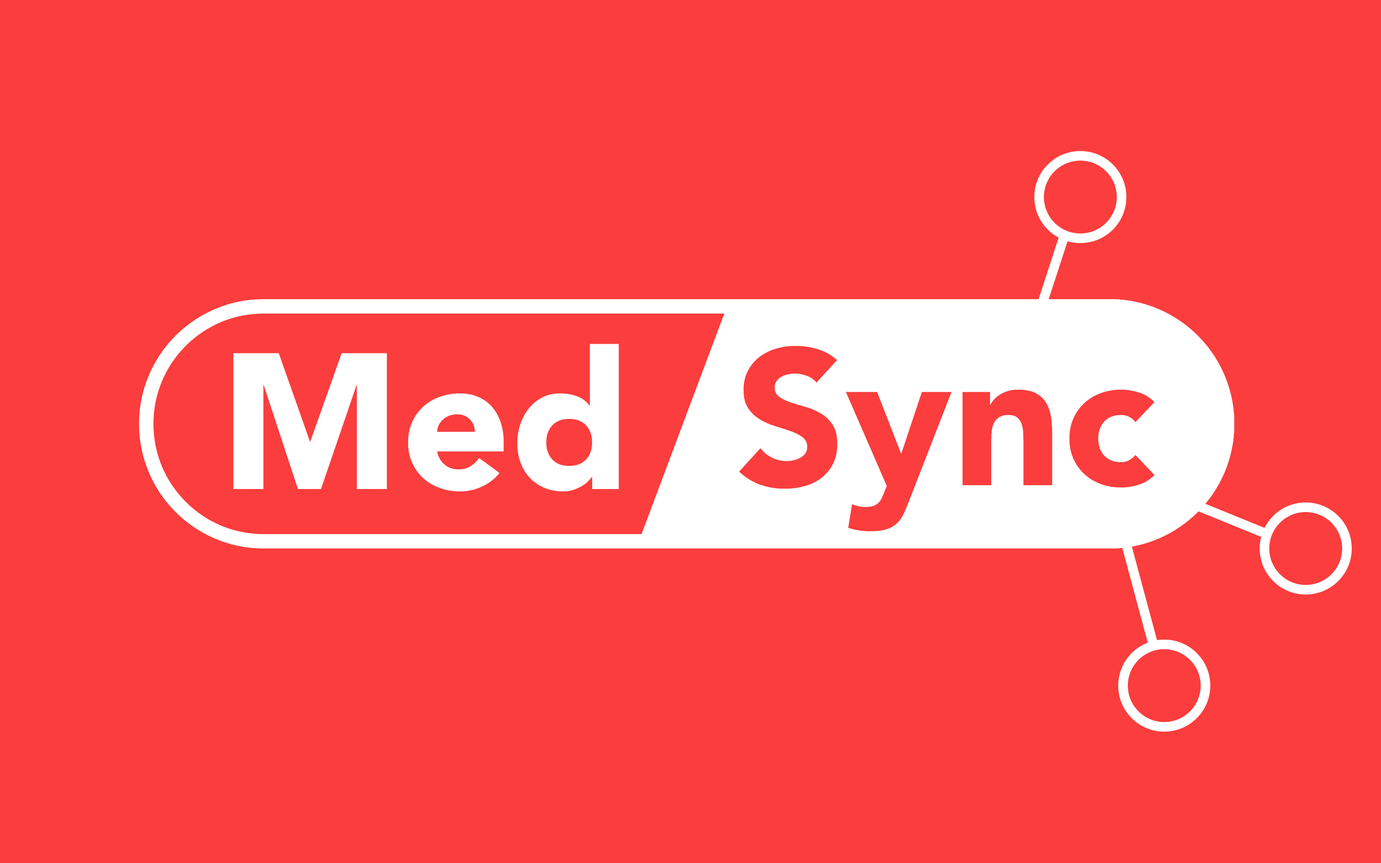
<style>
.page{position:relative;width:1381px;height:863px;background:#fb3d3d}
.page>*{position:absolute;margin:0}
.t1{font:191.8px "Avenir-Black";color:#ffffff}
.t2{font:191.8px "Avenir-Black";color:#fb3d3d}
</style>
<div class="page">
<p class="t1" style="left:233px;top:344px;width:386px;height:148px">Med</p>
<p class="t2" style="left:739px;top:346px;width:416px;height:185px">Sync</p>
</div>
